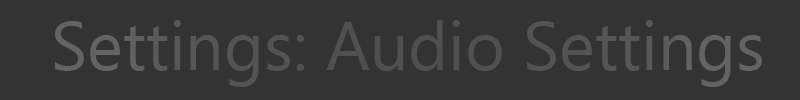
<style>
.page{position:relative;width:800px;height:100px;background:#333333}
.page>*{position:absolute;margin:0}
.t1{font:68px "MyanmarText";color:#555555}
</style>
<div class="page">
<p class="t1" style="left:55px;top:20px;width:707px;height:67px">Settings: Audio Settings</p>
</div>
